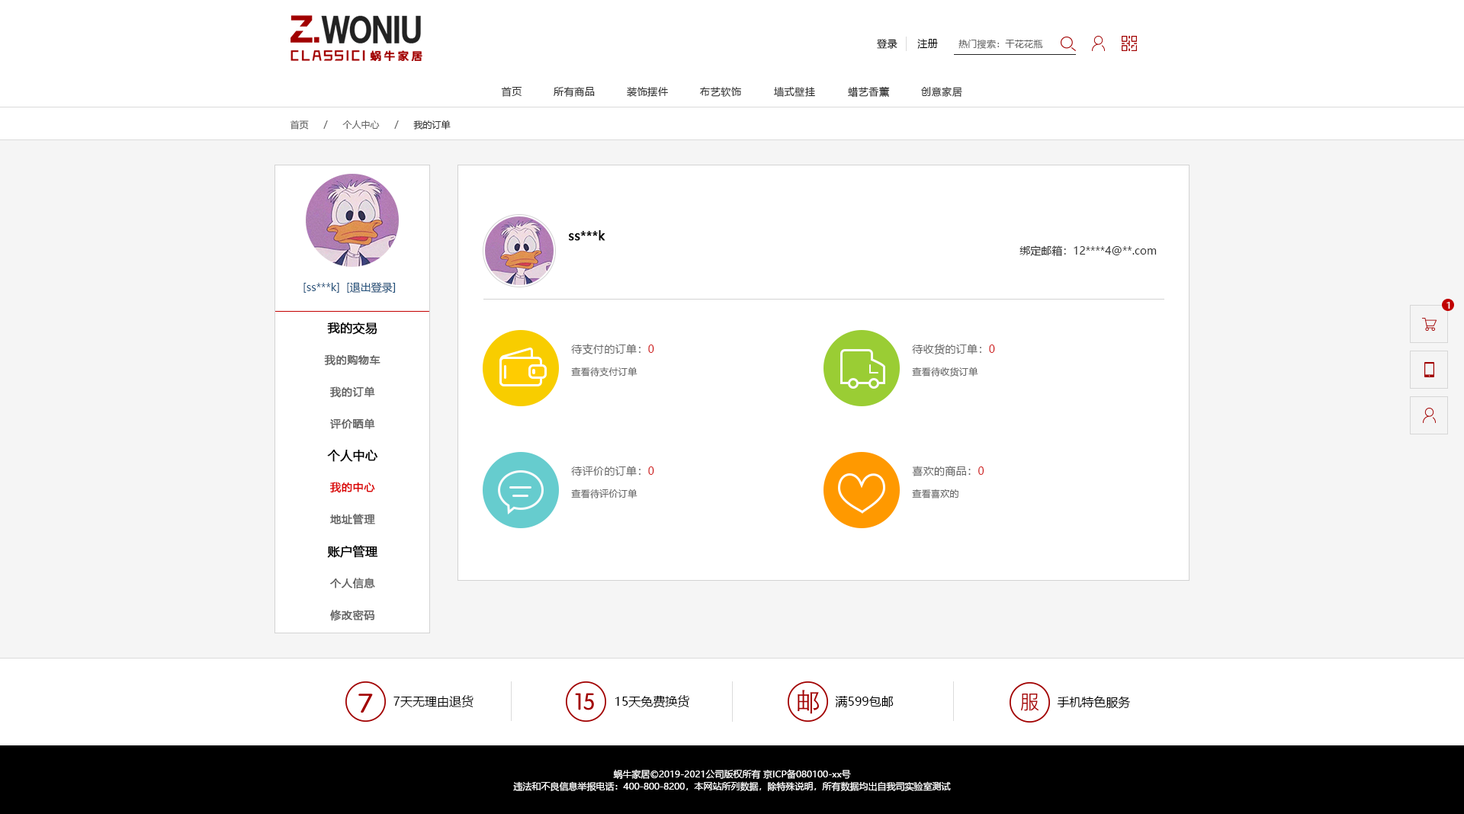
<style>
.page{position:relative;width:1464px;height:814px;background:#ffffff}
.page>*{position:absolute;margin:0}
.t1{font:9.9px "MicrosoftYaHei";letter-spacing:0.05em;color:#000000}
.t2{font:9.2px "MicrosoftYaHei";letter-spacing:0.025em;color:#686868}
.t3{font:9.9px "MicrosoftYaHei";letter-spacing:0.05em;color:#333333}
.t4{font:9.2px "MicrosoftYaHei";color:#666666}
.t5{font:9.2px "MicrosoftYaHei";color:#333333}
.t6{font:12.2px "MicrosoftYaHei";color:#000000;font-weight:bold}
.t7{font:10.7px "MicrosoftYaHei";color:#333333}
.t8{font:10.7px "MicrosoftYaHei";color:#23527c}
.t9{font:9.2px "MicrosoftYaHei";letter-spacing:0.025em;color:#ffffff}
.t10{font:10.7px "MicrosoftYaHei";letter-spacing:0.025em;color:#686868}
.t11{font:10.7px "MicrosoftYaHei";letter-spacing:0.025em;color:#d12222}
.t12{font:10.7px "MicrosoftYaHei";letter-spacing:0.025em;color:#626262;font-weight:bold}
.t13{font:10.7px "MicrosoftYaHei";letter-spacing:0.025em;color:#db0000;font-weight:bold}
.t14{font:12.2px "MicrosoftYaHei";color:#000000}
.t15{font:9.2px/12.2px "MicrosoftYaHei";color:#ffffff}
</style>
<div class="page">
<p class="t1" style="left:877px;top:39px;width:21px;height:10px">登录</p>
<p class="t1" style="left:917px;top:39px;width:21px;height:10px">注册</p>
<p class="t2" style="left:959px;top:39px;width:84px;height:10px">热门搜索：干花花瓶</p>
<p class="t3" style="left:501px;top:87px;width:21px;height:10px">首页</p>
<p class="t3" style="left:554px;top:87px;width:41px;height:10px">所有商品</p>
<p class="t3" style="left:627px;top:87px;width:41px;height:10px">装饰摆件</p>
<p class="t3" style="left:700px;top:87px;width:41px;height:10px">布艺软饰</p>
<p class="t3" style="left:773px;top:87px;width:42px;height:10px">墙式壁挂</p>
<p class="t3" style="left:848px;top:86px;width:42px;height:12px">蜡艺香薰</p>
<p class="t3" style="left:921px;top:87px;width:41px;height:10px">创意家居</p>
<p class="t4" style="left:290px;top:120px;width:19px;height:10px">首页</p>
<p class="t4" style="left:323px;top:120px;width:5px;height:9px">/</p>
<p class="t4" style="left:342px;top:120px;width:38px;height:9px">个人中心</p>
<p class="t4" style="left:394px;top:120px;width:5px;height:9px">/</p>
<p class="t5" style="left:413px;top:120px;width:38px;height:10px">我的订单</p>
<p class="t6" style="left:569px;top:230px;width:36px;height:11px">ss***k</p>
<p class="t7" style="left:1020px;top:246px;width:137px;height:10px">绑定邮箱：12****4@**.com</p>
<p class="t8" style="left:304px;top:283px;width:35px;height:10px">[ss***k]</p>
<p class="t8" style="left:347px;top:282px;width:49px;height:11px">[退出登录]</p>
<p class="t9" style="left:1447px;top:302px;width:3px;height:7px">1</p>
<p class="t6" style="left:327px;top:323px;width:50px;height:12px">我的交易</p>
<p class="t10" style="left:571px;top:344px;width:83px;height:11px">待支付的订单：<span class="t11">0</span></p>
<p class="t10" style="left:912px;top:344px;width:83px;height:11px">待收货的订单：<span class="t11">0</span></p>
<p class="t12" style="left:324px;top:355px;width:57px;height:11px">我的购物车</p>
<p class="t2" style="left:571px;top:367px;width:67px;height:10px">查看待支付订单</p>
<p class="t2" style="left:912px;top:367px;width:66px;height:10px">查看待收货订单</p>
<p class="t12" style="left:330px;top:387px;width:45px;height:11px">我的订单</p>
<p class="t12" style="left:330px;top:419px;width:45px;height:10px">评价晒单</p>
<p class="t6" style="left:327px;top:450px;width:51px;height:12px">个人中心</p>
<p class="t10" style="left:571px;top:466px;width:83px;height:11px">待评价的订单：<span class="t11">0</span></p>
<p class="t10" style="left:912px;top:466px;width:72px;height:11px">喜欢的商品：<span class="t11">0</span></p>
<p class="t13" style="left:330px;top:482px;width:45px;height:11px">我的中心</p>
<p class="t2" style="left:571px;top:489px;width:67px;height:10px">查看待评价订单</p>
<p class="t2" style="left:912px;top:489px;width:47px;height:10px">查看喜欢的</p>
<p class="t12" style="left:330px;top:514px;width:45px;height:11px">地址管理</p>
<p class="t6" style="left:327px;top:545px;width:51px;height:13px">账户管理</p>
<p class="t12" style="left:330px;top:578px;width:45px;height:11px">个人信息</p>
<p class="t12" style="left:330px;top:610px;width:45px;height:11px">修改密码</p>
<p class="t14" style="left:393px;top:695px;width:81px;height:13px">7天无理由退货</p>
<p class="t14" style="left:615px;top:695px;width:74px;height:13px">15天免费换货</p>
<p class="t14" style="left:835px;top:696px;width:59px;height:12px">满599包邮</p>
<p class="t14" style="left:1057px;top:696px;width:74px;height:13px">手机特色服务</p>
<p class="t15" style="left:513px;top:769px;width:438px;height:23px;text-align:center">蜗牛家居©2019-2021公司版权所有 京ICP备080100-xx号<br>违法和不良信息举报电话：400-800-8200，本网站所列数据，除特殊说明，所有数据均出自我司实验室测试</p>
</div>
